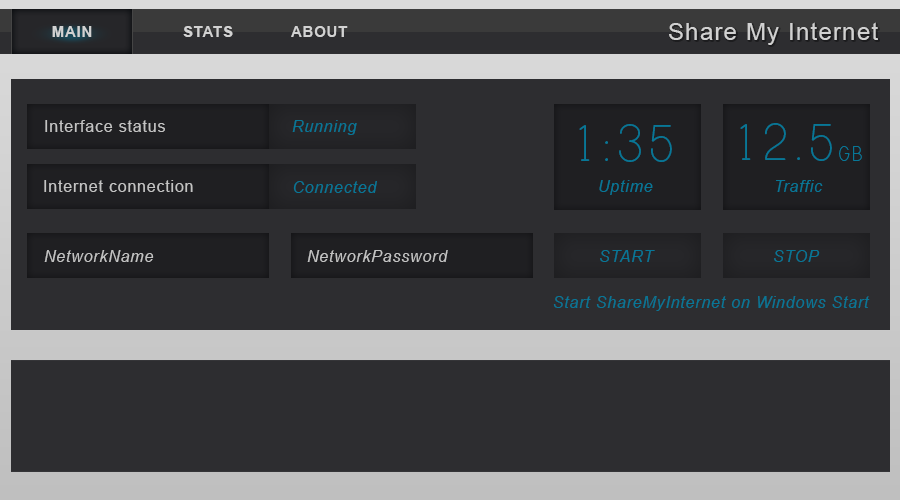
<style>
.page{position:relative;width:900px;height:500px;background:#2d2d30}
.page>*{position:absolute;margin:0}
.t1{font:15px "Arial-BoldMT";letter-spacing:0.05em;color:#d2d2d2}
.t2{font:24px "ArialMT";letter-spacing:0.05em;color:#d1d1d1}
.t3{font:16px "ArialMT";letter-spacing:0.05em;color:#c3c3c3}
.t4{font:16px "Arial-ItalicMT";letter-spacing:0.05em;color:#077797}
.t5{font:60px "PrintClearly";letter-spacing:0.05em;color:#077797}
.t6{font:24px "PrintClearly";letter-spacing:0.05em;color:#077797}
.t7{font:16px "Arial-ItalicMT";letter-spacing:0.05em;color:#c3c3c3}
</style>
<div class="page">
<p class="t1" style="left:52px;top:26px;width:40px;height:11px">MAIN</p>
<p class="t1" style="left:183px;top:26px;width:165px;height:11px">STATS  ABOUT</p>
<p class="t2" style="left:669px;top:22px;width:209px;height:23px">Share My Internet</p>
<p class="t3" style="left:45px;top:120px;width:120px;height:12px">Interface status</p>
<p class="t4" style="left:292px;top:120px;width:65px;height:15px">Running</p>
<p class="t5" style="left:579px;top:124px;width:93px;height:38px">1:35</p>
<p class="t5" style="left:740px;top:123px;width:92px;height:38px">12.5</p>
<p class="t6" style="left:839px;top:146px;width:23px;height:15px">GB</p>
<p class="t3" style="left:44px;top:180px;width:149px;height:12px">Internet connection</p>
<p class="t4" style="left:293px;top:181px;width:84px;height:12px">Connected</p>
<p class="t4" style="left:599px;top:180px;width:54px;height:15px">Uptime</p>
<p class="t4" style="left:776px;top:180px;width:47px;height:12px">Traffic</p>
<p class="t7" style="left:44px;top:250px;width:110px;height:12px">NetworkName</p>
<p class="t7" style="left:307px;top:250px;width:141px;height:12px">NetworkPassword</p>
<p class="t4" style="left:600px;top:250px;width:55px;height:12px">START</p>
<p class="t4" style="left:774px;top:250px;width:46px;height:12px">STOP</p>
<p class="t4" style="left:553px;top:296px;width:317px;height:15px">Start ShareMyInternet on Windows Start</p>
</div>
